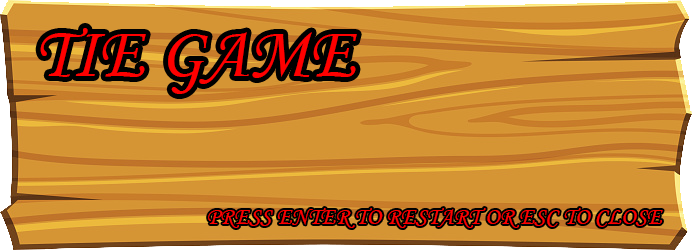
<style>
.page{position:relative;width:692px;height:250px;background:#d59534}
.page>*{position:absolute;margin:0}
.t1{font:72px "MonotypeCorsiva";color:#ff0000}
.t2{font:24px "MonotypeCorsiva";color:#ff0000}
</style>
<div class="page">
<p class="t1" style="left:40px;top:28px;width:317px;height:66px">TIE GAME</p>
<p class="t2" style="left:208px;top:208px;width:455px;height:20px">PRESS ENTER TO RESTART OR ESC TO CLOSE</p>
</div>
